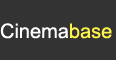
<style>
.page{position:relative;width:116px;height:60px;background:#333333}
.page>*{position:absolute;margin:0}
.t1{font:20px "ArialMT";color:#ffffff}
.t2{font:20px "ArialMT";color:#fff34b}
</style>
<div class="page">
<p class="t1" style="left:0px;top:23px;width:112px;height:16px">Cinema<span class="t2">base</span></p>
</div>
